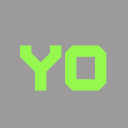
<style>
.page{position:relative;width:128px;height:128px;background:#9c9a9a}
.page>*{position:absolute;margin:0}
.t1{font:120px "Alex-Murphy-Solid";color:#96f74f}
</style>
<div class="page">
<p class="t1" style="left:20px;top:45px;width:87px;height:46px">yo</p>
</div>
